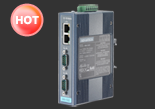
<style>
.page{position:relative;width:155px;height:109px;background:#333333}
.page>*{position:absolute;margin:0}
.t1{font:10.7px "Arial-BoldMT";color:#ffffff;font-weight:bold}
</style>
<div class="page">
<p class="t1" style="left:16px;top:15px;width:23px;height:10px">HOT</p>
</div>
